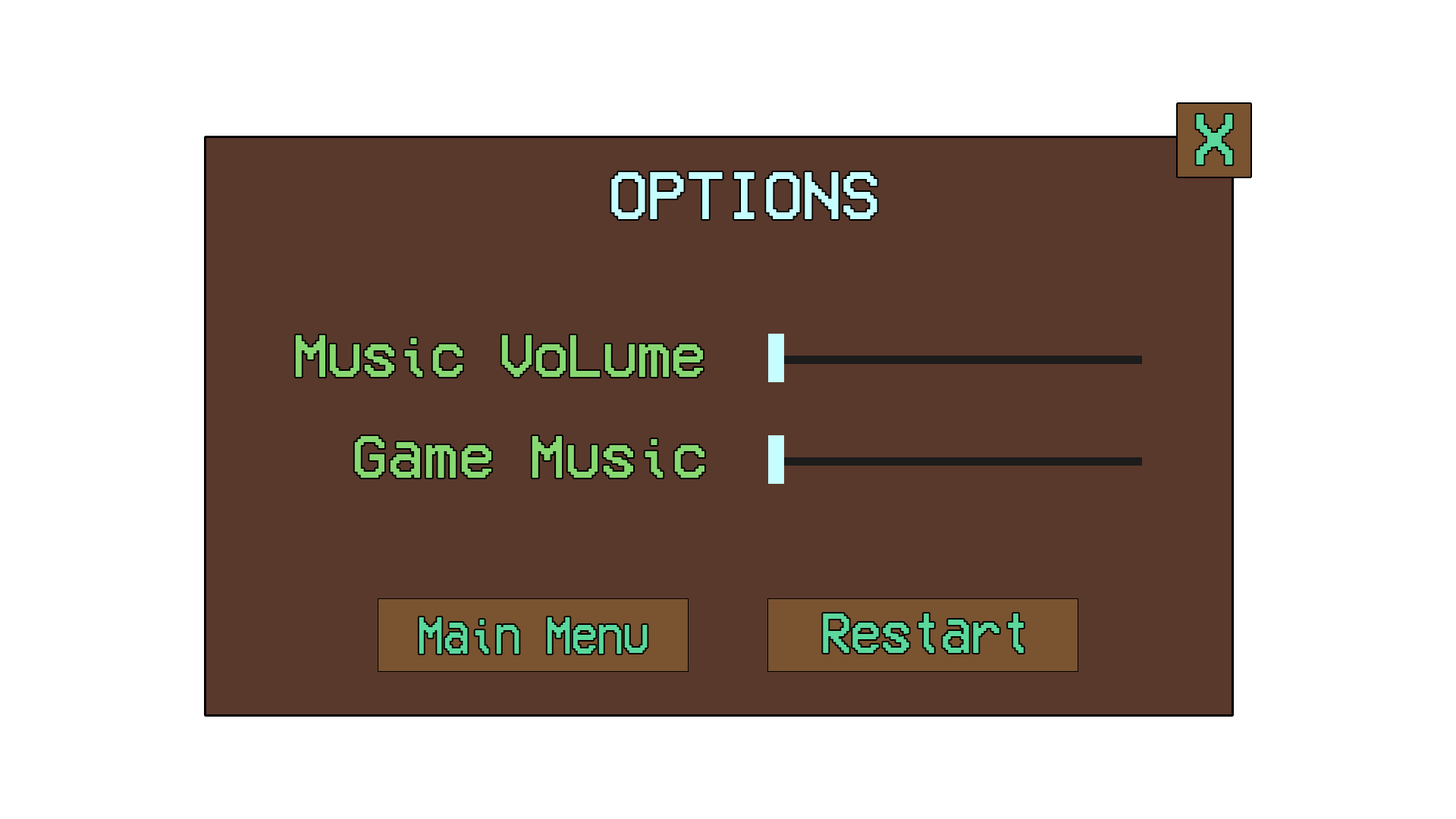
<style>
.page{position:relative;width:1456px;height:819px;background:#ffffff}
.page>*{position:absolute;margin:0}
.t1{font:73.2px "VCROSDMono";letter-spacing:-0.02em;color:#5bd89c}
.t2{font:68.2px "VCROSDMono";letter-spacing:-0.02em;color:#c6fdff}
.t3{font:60.7px "VCROSDMono";letter-spacing:-0.02em;color:#88d872}
.t4{font:60.7px "VCROSDMono";color:#88d872}
.t5{font:53.1px "VCROSDMono";letter-spacing:-0.02em;color:#5bd89c;scale:0.86 1}
.t6{font:57.7px "VCROSDMono";letter-spacing:-0.02em;color:#5bd89c;scale:0.92 1}
</style>
<div class="page">
<p class="t1" style="left:1196px;top:115px;width:37px;height:50px">X</p>
<p class="t2" style="left:611px;top:172px;width:266px;height:47px">OPTIONS</p>
<p class="t3" style="left:295px;top:335px;width:408px;height:42px">Music VoLume</p>
<p class="t4" style="left:354px;top:436px;width:350px;height:42px">Game Music</p>
<p class="t5" style="left:419px;top:617px;width:229px;height:37px">Main Menu</p>
<p class="t6" style="left:823px;top:613px;width:201px;height:40px">Restart</p>
</div>
